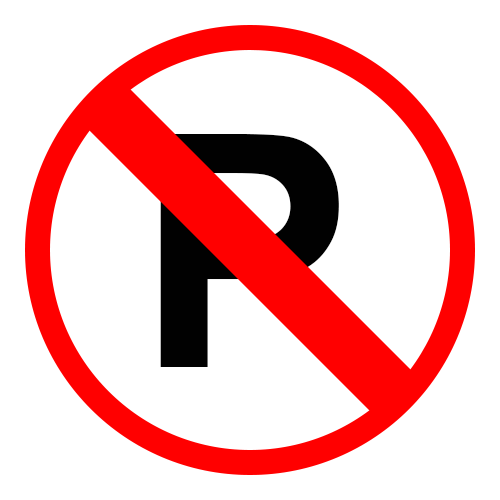
<style>
.page{position:relative;width:500px;height:500px;background:#ffffff}
.page>*{position:absolute;margin:0}
.t1{font:325px "Arial-BoldMT";letter-spacing:-0.015em;color:#010101}
</style>
<div class="page">
<p class="t1" style="left:160px;top:134px;width:179px;height:233px">P</p>
</div>
